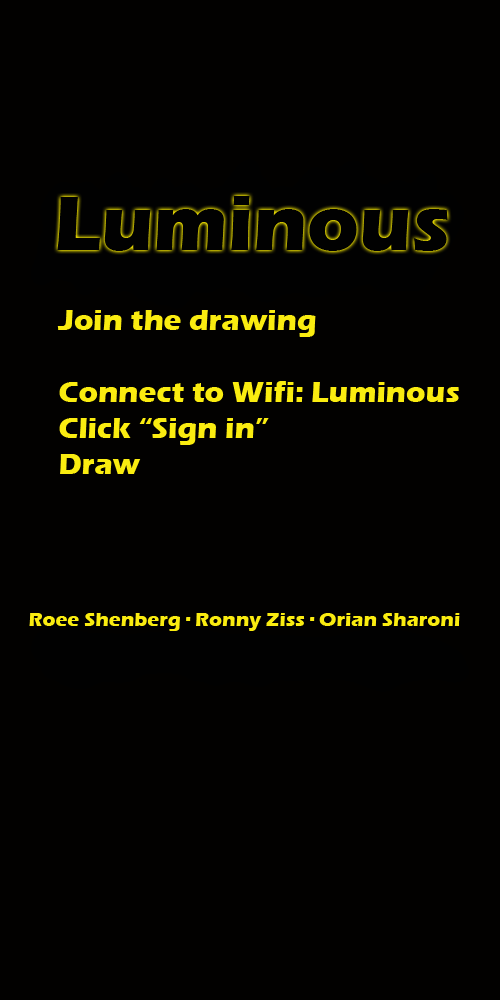
<style>
.page{position:relative;width:500px;height:1000px;background:#020100}
.page>*{position:absolute;margin:0}
.t1{font:30px "ErasITC-Bold";color:#faec10}
.t2{font:20px "ErasITC-Bold";color:#faec10}
</style>
<div class="page">
<p class="t1" style="left:57px;top:310px;width:402px;height:164px">Join the drawing<br><br>Connect to Wifi: Luminous<br>Click “Sign in”<br>Draw</p>
<p class="t2" style="left:29px;top:613px;width:431px;height:18px">Roee Shenberg · Ronny Ziss · Orian Sharoni</p>
</div>
